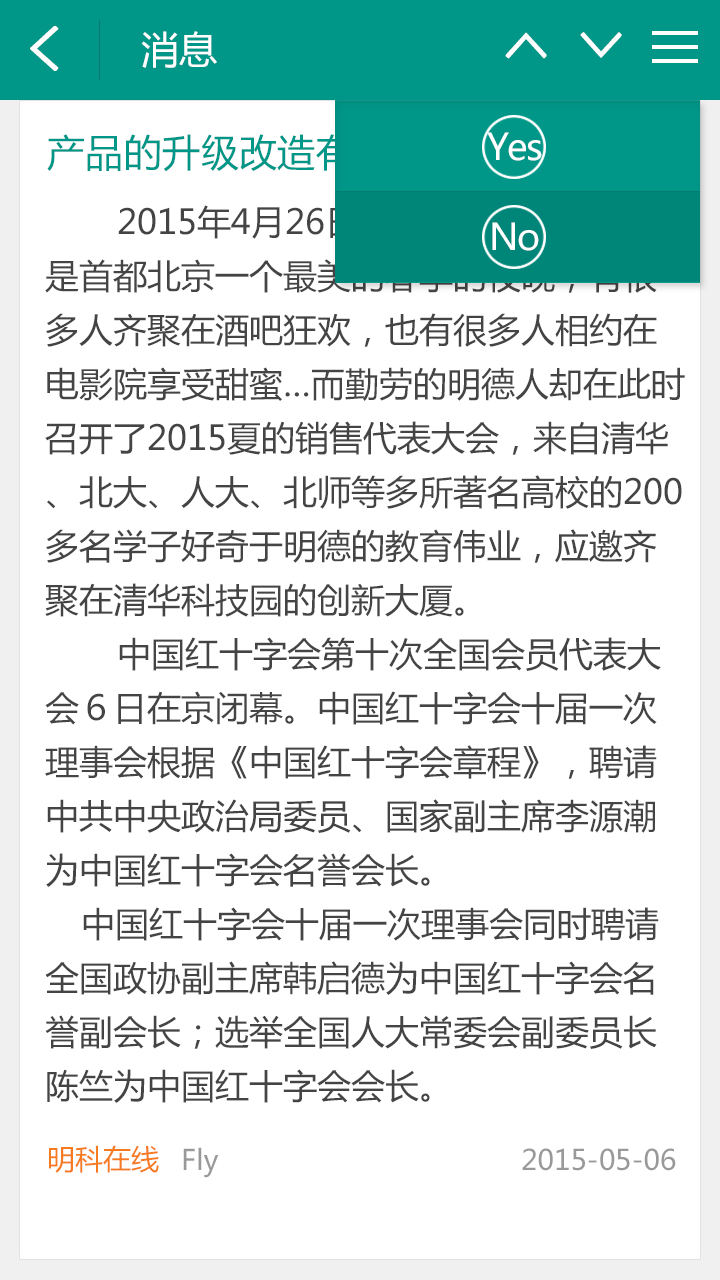
<style>
.page{position:relative;width:720px;height:1280px;background:#ffffff}
.page>*{position:absolute;margin:0}
.t1{font:62px "SimHei";color:#ffffff;font-weight:bold}
.t2{font:38px "MicrosoftYaHei";color:#ffffff}
.t3{font:56px "SimHei";color:#ffffff;font-weight:bold}
.t4{font:38px "MicrosoftYaHei";letter-spacing:0.01em;color:#009788}
.t5{font:36.3px "MicrosoftYaHei";letter-spacing:-0.05em;color:#ffffff}
.t6{font:34px/54px "MicrosoftYaHei";color:#444444}
.t7{font:28px "MicrosoftYaHei";color:#f67b20}
.t8{font:28px "MicrosoftYaHei";color:#999999}
</style>
<div class="page">
<p class="t1" style="left:30px;top:26px;width:29px;height:45px">&lt;</p>
<p class="t2" style="left:141px;top:31px;width:76px;height:37px">消息</p>
<p class="t3" style="left:505px;top:32px;width:42px;height:27px;rotate:90deg">&lt;</p>
<p class="t3" style="left:580px;top:32px;width:42px;height:26px;rotate:-90deg">&lt;</p>
<p class="t4" style="left:47px;top:134px;width:559px;height:38px">产品的升级改造有你参与更精彩！</p>
<p class="t5" style="left:487px;top:132px;width:55px;height:29px">Yes</p>
<p class="t6" style="left:45px;top:205px;width:640px;height:898px">2015年4月26日，华灯初上之时，这是首都北京一个最美的春季的夜晚，有很多人齐聚在酒吧狂欢，也有很多人相约在电影院享受甜蜜…而勤劳的明德人却在此时召开了2015夏的销售代表大会，来自清华、北大、人大、北师等多所著名高校的200多名学子好奇于明德的教育伟业，应邀齐聚在清华科技园的创新大厦。<br>  中国红十字会第十次全国会员代表大会６日在京闭幕。中国红十字会十届一次理事会根据《中国红十字会章程》，聘请中共中央政治局委员、国家副主席李源潮为中国红十字会名誉会长。<br> 中国红十字会十届一次理事会同时聘请全国政协副主席韩启德为中国红十字会名誉副会长；选举全国人大常委会副委员长陈竺为中国红十字会会长。</p>
<p class="t5" style="left:492px;top:222px;width:47px;height:29px">No</p>
<p class="t7" style="left:49px;top:1145px;width:110px;height:28px">明科在线</p>
<p class="t8" style="left:183px;top:1147px;width:36px;height:31px">Fly</p>
<p class="t8" style="left:522px;top:1148px;width:154px;height:23px">2015-05-06</p>
</div>
